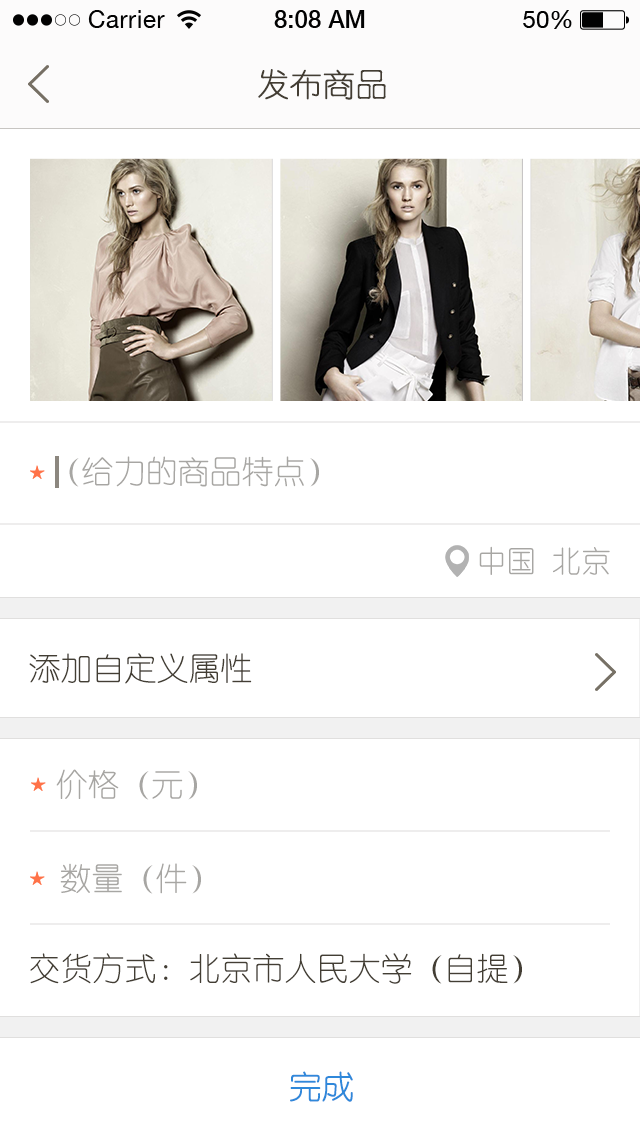
<style>
.page{position:relative;width:640px;height:1136px;background:#ffffff}
.page>*{position:absolute;margin:0}
.t1{font:32px "YouYuan";color:#433d33;text-transform:uppercase;font-weight:bold}
.t2{font:32px "YouYuan";color:#a7a6a3;text-transform:uppercase}
.t3{font:30px "YouYuan";color:#a7a6a3;text-transform:uppercase}
.t4{font:32px "YouYuan";color:#433e34;text-transform:uppercase}
.t5{font:32px "YouYuan";color:#2f88da;text-transform:uppercase;font-weight:bold}
</style>
<div class="page">
<p class="t1" style="left:258px;top:69px;width:128px;height:31px">发布商品</p>
<p class="t2" style="left:69px;top:456px;width:250px;height:31px">（给力的商品特点）</p>
<p class="t3" style="left:479px;top:546px;width:131px;height:29px">中国 北京</p>
<p class="t4" style="left:29px;top:653px;width:223px;height:31px">添加自定义属性</p>
<p class="t2" style="left:56px;top:769px;width:141px;height:31px">价格（元）</p>
<p class="t2" style="left:60px;top:863px;width:141px;height:31px">数量（件）</p>
<p class="t4" style="left:30px;top:953px;width:492px;height:31px">交货方式：北京市人民大学（自提）</p>
<p class="t5" style="left:290px;top:1071px;width:63px;height:31px">完成</p>
</div>
